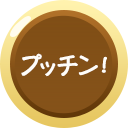
<style>
.page{position:relative;width:128px;height:128px;background:#ffffff}
.page>*{position:absolute;margin:0}
.t1{font:23px "HannotateSC-W7";letter-spacing:-0.025em;color:#fffcf8;font-weight:bold}
</style>
<div class="page">
<p class="t1" style="left:21px;top:53px;width:86px;height:24px">プッチン!</p>
</div>
